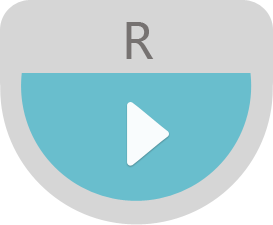
<style>
.page{position:relative;width:273px;height:225px;background:#d6d6d6}
.page>*{position:absolute;margin:0}
.t1{font:48px "MicrosoftYaHei";color:#767271}
</style>
<div class="page">
<p class="t1" style="left:126px;top:22px;width:28px;height:37px">R</p>
</div>
